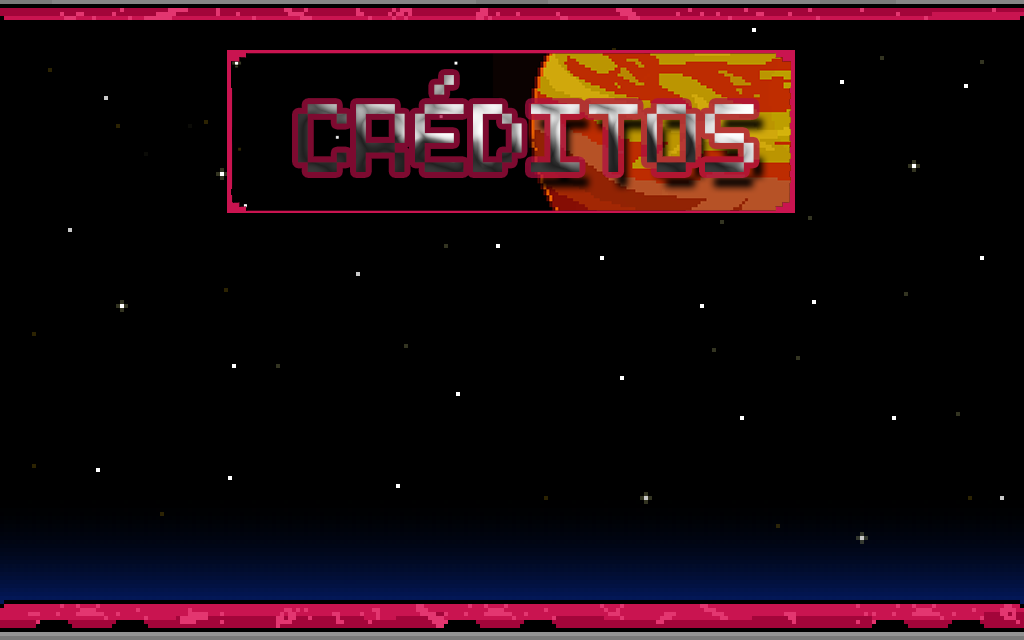
<style>
.page{position:relative;width:1024px;height:640px;background:#000000}
.page>*{position:absolute;margin:0}
.t1{font:155.1px "Essential"}
</style>
<div class="page">
<p class="t1" style="left:298px;top:75px;width:456px;height:97px">CRÉDITOS</p>
</div>
